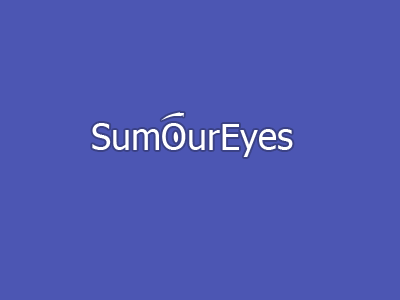
<style>
.page{position:relative;width:400px;height:300px;background:#4c56b3}
.page>*{position:absolute;margin:0}
.t1{font:36px "Tahoma";color:#ffffff}
</style>
<div class="page">
<p class="t1" style="left:92px;top:123px;width:201px;height:34px">SumOurEyes</p>
</div>
